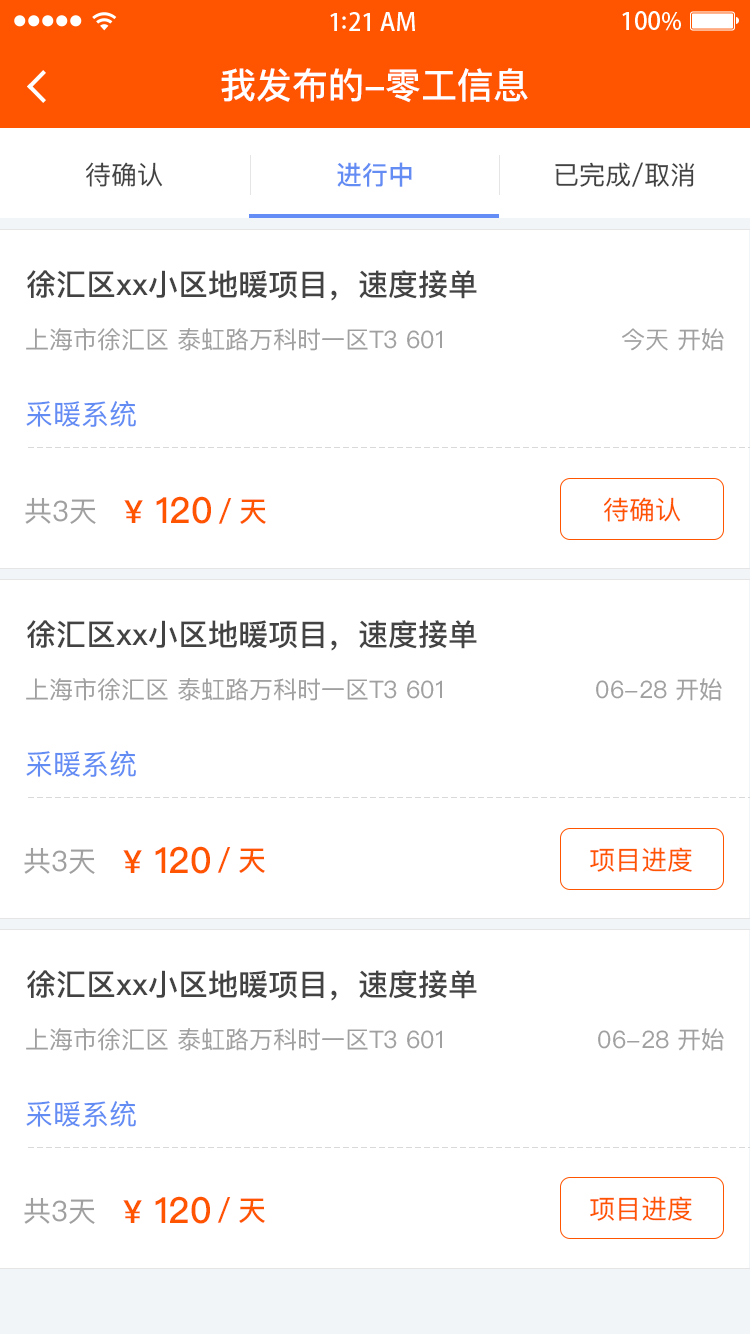
<style>
.page{position:relative;width:750px;height:1334px;background:#ffffff}
.page>*{position:absolute;margin:0}
.t1{font:36px "PingFangSC-Medium";color:#ffffff}
.t2{font:26px "PingFangSC-Regular";color:#434343}
.t3{font:26px "PingFangSC-Medium";color:#648df4}
.t4{font:30px "PingFangSC-Medium";color:#434343}
.t5{font:24px "PingFangSC-Regular";color:#a0a0a0}
.t6{font:28px "PingFangSC-Regular";color:#648df4}
.t7{font:28px "PingFangSC-Regular";color:#a0a0a0}
.t8{font:36px "PingFangSC-Medium";color:#ff5400}
.t9{font:32px "PingFangSC-Medium";color:#ff5400}
.t10{font:26px "PingFangSC-Regular";color:#ff5400}
.t11{font:28px "PingFangSC-Medium";color:#ff5400}
</style>
<div class="page">
<p class="t1" style="left:221px;top:68px;width:307px;height:35px">我发布的-零工信息</p>
<p class="t2" style="left:86px;top:162px;width:77px;height:25px">待确认</p>
<p class="t3" style="left:337px;top:162px;width:75px;height:25px">进行中</p>
<p class="t2" style="left:555px;top:162px;width:140px;height:25px">已完成/取消</p>
<p class="t4" style="left:27px;top:270px;width:450px;height:31px">徐汇区xx小区地暖项目，速度接单</p>
<p class="t5" style="left:26px;top:328px;width:416px;height:23px">上海市徐汇区 泰虹路万科时一区T3 601</p>
<p class="t5" style="left:622px;top:328px;width:102px;height:23px">今天 开始</p>
<p class="t6" style="left:26px;top:400px;width:110px;height:27px">采暖系统</p>
<p class="t7" style="left:25px;top:497px;width:71px;height:27px">共3天</p>
<p class="t8" style="left:124px;top:496px;width:87px;height:28px"><span class="t9">¥</span> 120</p>
<p class="t10" style="left:604px;top:497px;width:77px;height:25px">待确认</p>
<p class="t11" style="left:218px;top:498px;width:48px;height:26px">／天</p>
<p class="t4" style="left:27px;top:620px;width:450px;height:31px">徐汇区xx小区地暖项目，速度接单</p>
<p class="t5" style="left:26px;top:678px;width:416px;height:23px">上海市徐汇区 泰虹路万科时一区T3 601</p>
<p class="t5" style="left:596px;top:678px;width:126px;height:23px">06-28 开始</p>
<p class="t6" style="left:26px;top:750px;width:110px;height:27px">采暖系统</p>
<p class="t8" style="left:123px;top:846px;width:87px;height:28px"><span class="t9">¥</span> 120</p>
<p class="t7" style="left:24px;top:847px;width:71px;height:27px">共3天</p>
<p class="t11" style="left:217px;top:847px;width:48px;height:26px">／天</p>
<p class="t10" style="left:590px;top:847px;width:102px;height:25px">项目进度</p>
<p class="t4" style="left:27px;top:970px;width:450px;height:31px">徐汇区xx小区地暖项目，速度接单</p>
<p class="t5" style="left:26px;top:1028px;width:416px;height:23px">上海市徐汇区 泰虹路万科时一区T3 601</p>
<p class="t5" style="left:598px;top:1028px;width:126px;height:23px">06-28 开始</p>
<p class="t6" style="left:26px;top:1100px;width:110px;height:27px">采暖系统</p>
<p class="t7" style="left:24px;top:1197px;width:71px;height:27px">共3天</p>
<p class="t8" style="left:123px;top:1196px;width:87px;height:28px"><span class="t9">¥</span> 120</p>
<p class="t11" style="left:217px;top:1197px;width:48px;height:26px">／天</p>
<p class="t10" style="left:590px;top:1196px;width:102px;height:25px">项目进度</p>
</div>
